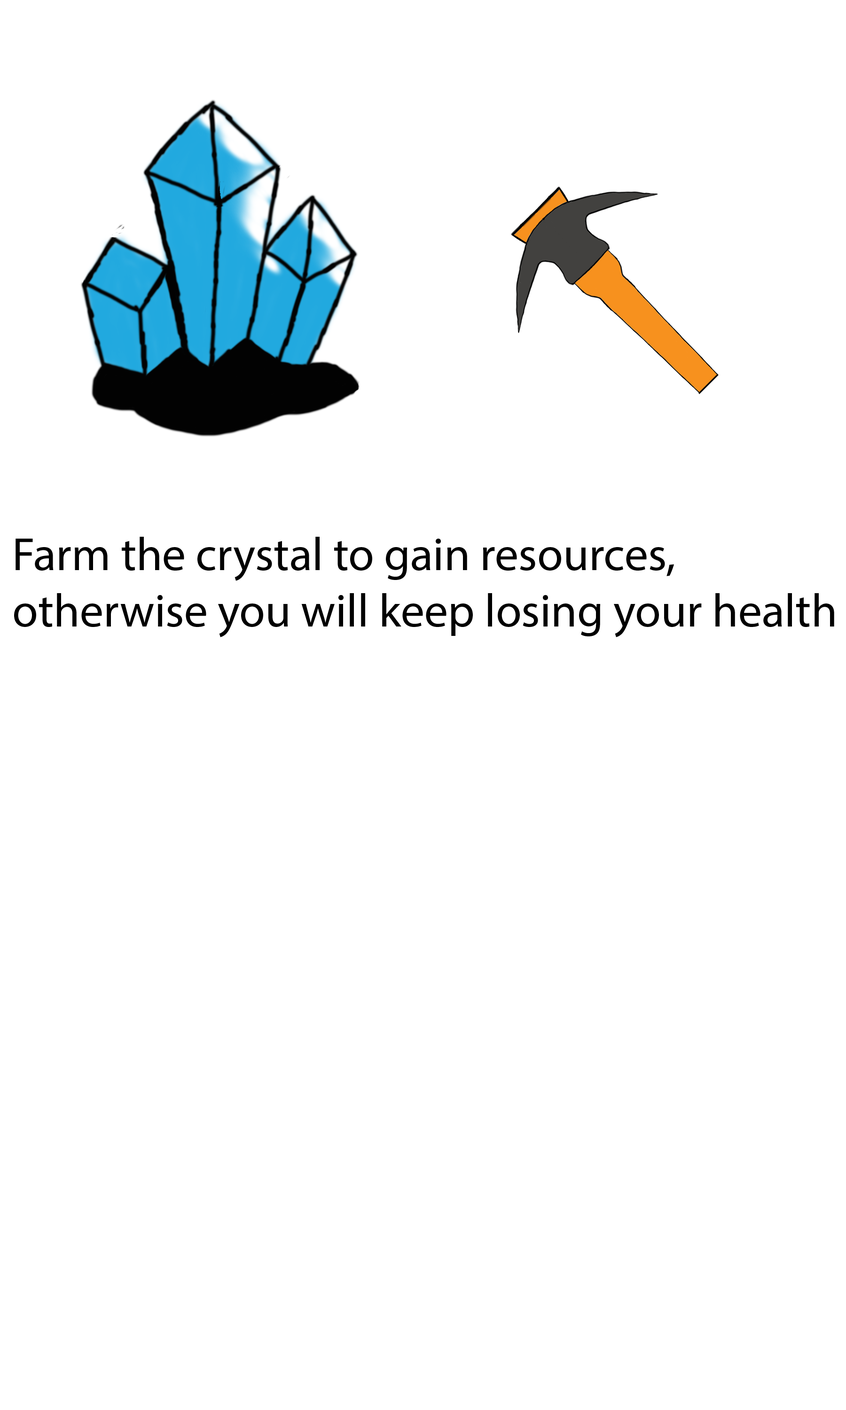
<style>
.page{position:relative;width:846px;height:1410px;background:#ffffff}
.page>*{position:absolute;margin:0}
.t1{font:47px "MyriadPro-Regular";color:#000000}
</style>
<div class="page">
<p class="t1" style="left:14px;top:537px;width:820px;height:100px">Farm the crystal to gain resources, <br>otherwise you will keep losing your health</p>
</div>
